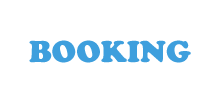
<style>
.page{position:relative;width:220px;height:100px;background:#ffffff}
.page>*{position:absolute;margin:0}
.t1{font:30px "CooperBlackStd";color:#3e9fdd}
</style>
<div class="page">
<p class="t1" style="left:29px;top:40px;width:162px;height:23px">BOOKING</p>
</div>
